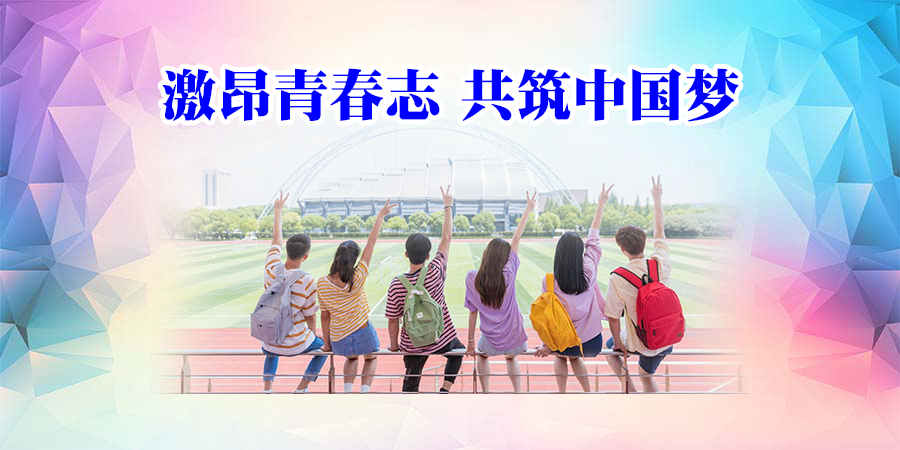
<style>
.page{position:relative;width:900px;height:450px}
.page>*{position:absolute;margin:0}
.t1{font:56px "DFPSongW12";color:#0000ff}
</style>
<div class="page">
<p class="t1" style="left:162px;top:68px;width:577px;height:54px">激昂青春志 共筑中国梦</p>
</div>
